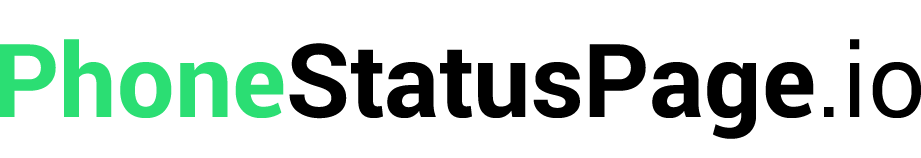
<style>
.page{position:relative;width:921px;height:158px;background:#ffffff}
.page>*{position:absolute;margin:0}
.t1{font:102px "Roboto-Bold";color:#000000}
.t2{font:102px "Roboto-Bold";color:#2bde73}
.t3{font:102px "Roboto-Regular";color:#000000}
</style>
<div class="page">
<p class="t1" style="left:0px;top:39px;width:921px;height:100px"><span class="t2">Phone</span>StatusPage<span class="t3">.io</span></p>
</div>
